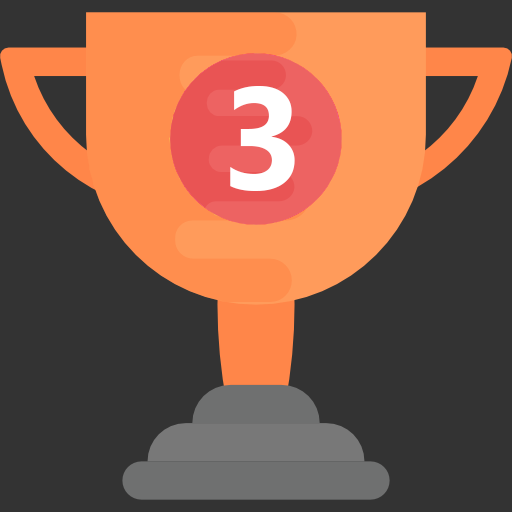
<style>
.page{position:relative;width:512px;height:512px;background:#333333}
.page>*{position:absolute;margin:0}
.t1{font:144.4px "MyanmarText-Bold";color:#ffffff}
</style>
<div class="page">
<p class="t1" style="left:230px;top:86px;width:65px;height:105px">3</p>
</div>
